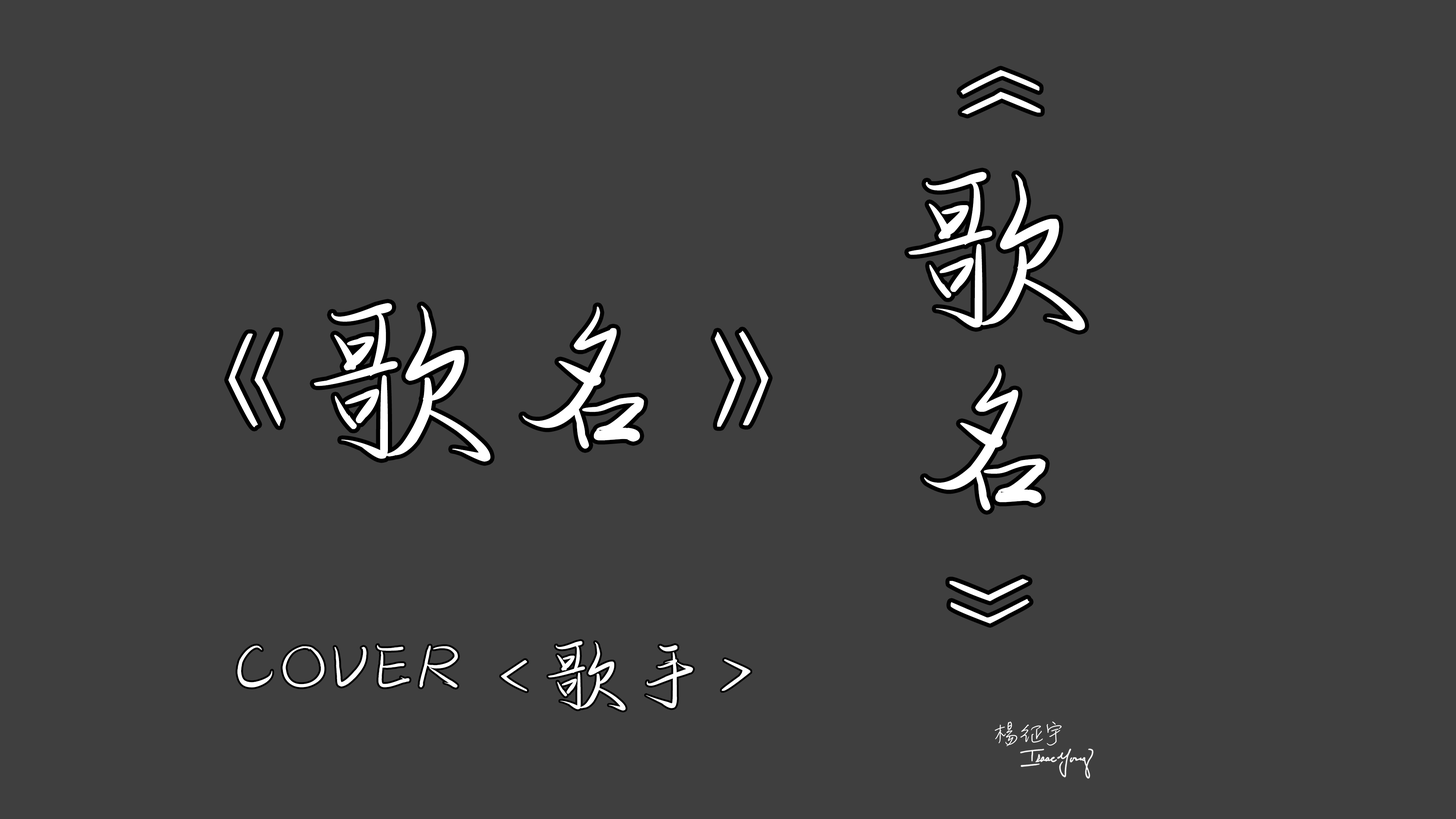
<style>
.page{position:relative;width:1456px;height:819px;background:#3f3f3f}
.page>*{position:absolute;margin:0}
.t1{font:182px/0px "zihun51hao-qingqingziyinti";letter-spacing:0.06em;color:#ffffff}
.t2{font:182px "zihun51hao-qingqingziyinti";letter-spacing:0.06em;color:#ffffff}
.t3{font:79.7px "zihun51hao-qingqingziyinti";letter-spacing:0.06em;color:#ffffff}
</style>
<div class="page">
<p class="t1" style="left:908px;top:70px;width:177px;height:554px;text-align:center">《歌名》</p>
<p class="t2" style="left:228px;top:303px;width:541px;height:159px">《歌名》</p>
<p class="t3" style="left:237px;top:641px;width:513px;height:70px">COVER &lt;歌手&gt;</p>
</div>
